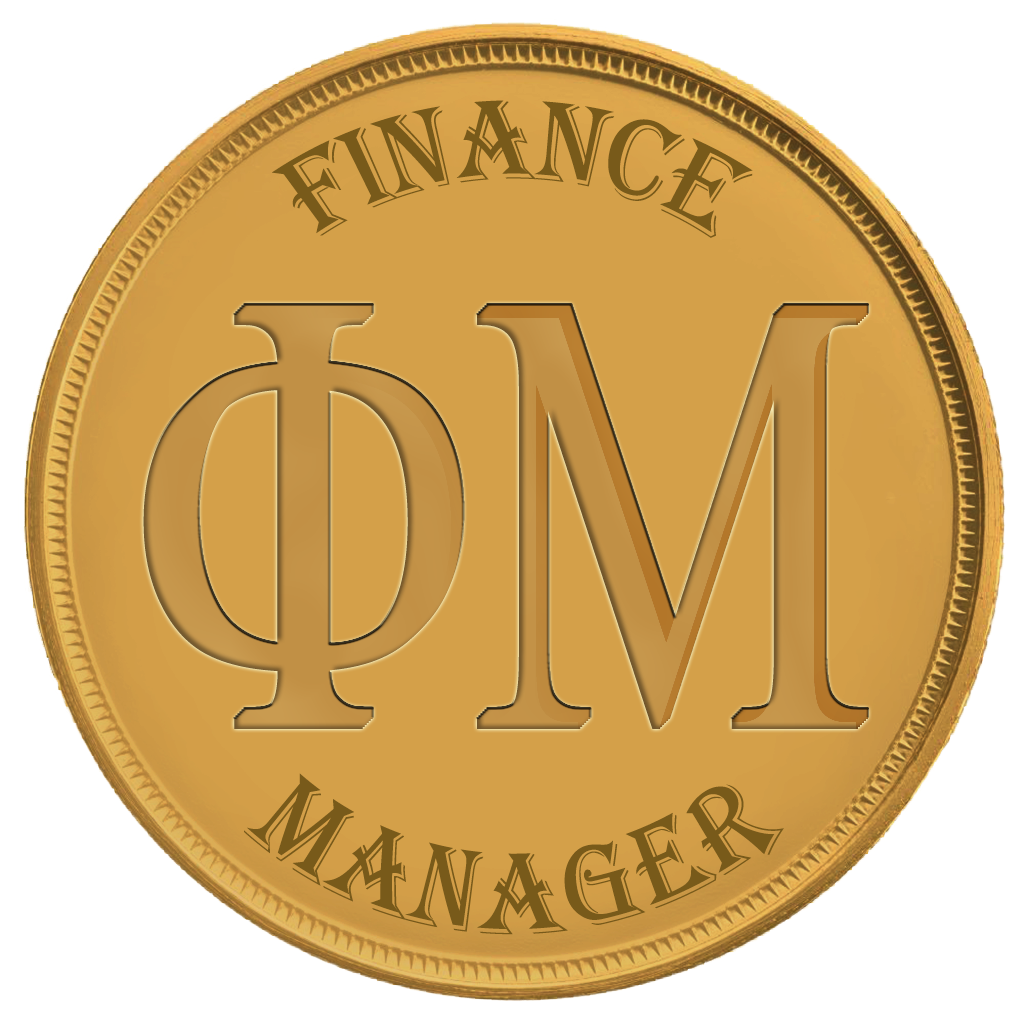
<style>
.page{position:relative;width:1024px;height:1024px;background:#ffffff}
.page>*{position:absolute;margin:0}
.t1{font:116.6px "Algerian";color:#785a1a;scale:0.76 1}
.t2{font:120.2px "Algerian";color:#785a1a;scale:0.71 1}
</style>
<div class="page">
<p class="t1" style="left:272px;top:100px;width:481px;height:138px">FINANCE</p>
<p class="t2" style="left:244px;top:773px;width:540px;height:162px">MANAGER</p>
</div>
